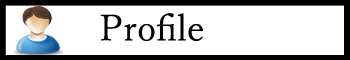
<style>
.page{position:relative;width:350px;height:60px;background:#ffffff}
.page>*{position:absolute;margin:0}
.t1{font:36px "YuMincho-Regular";color:#000000}
</style>
<div class="page">
<p class="t1" style="left:100px;top:13px;width:103px;height:28px">Profile</p>
</div>
